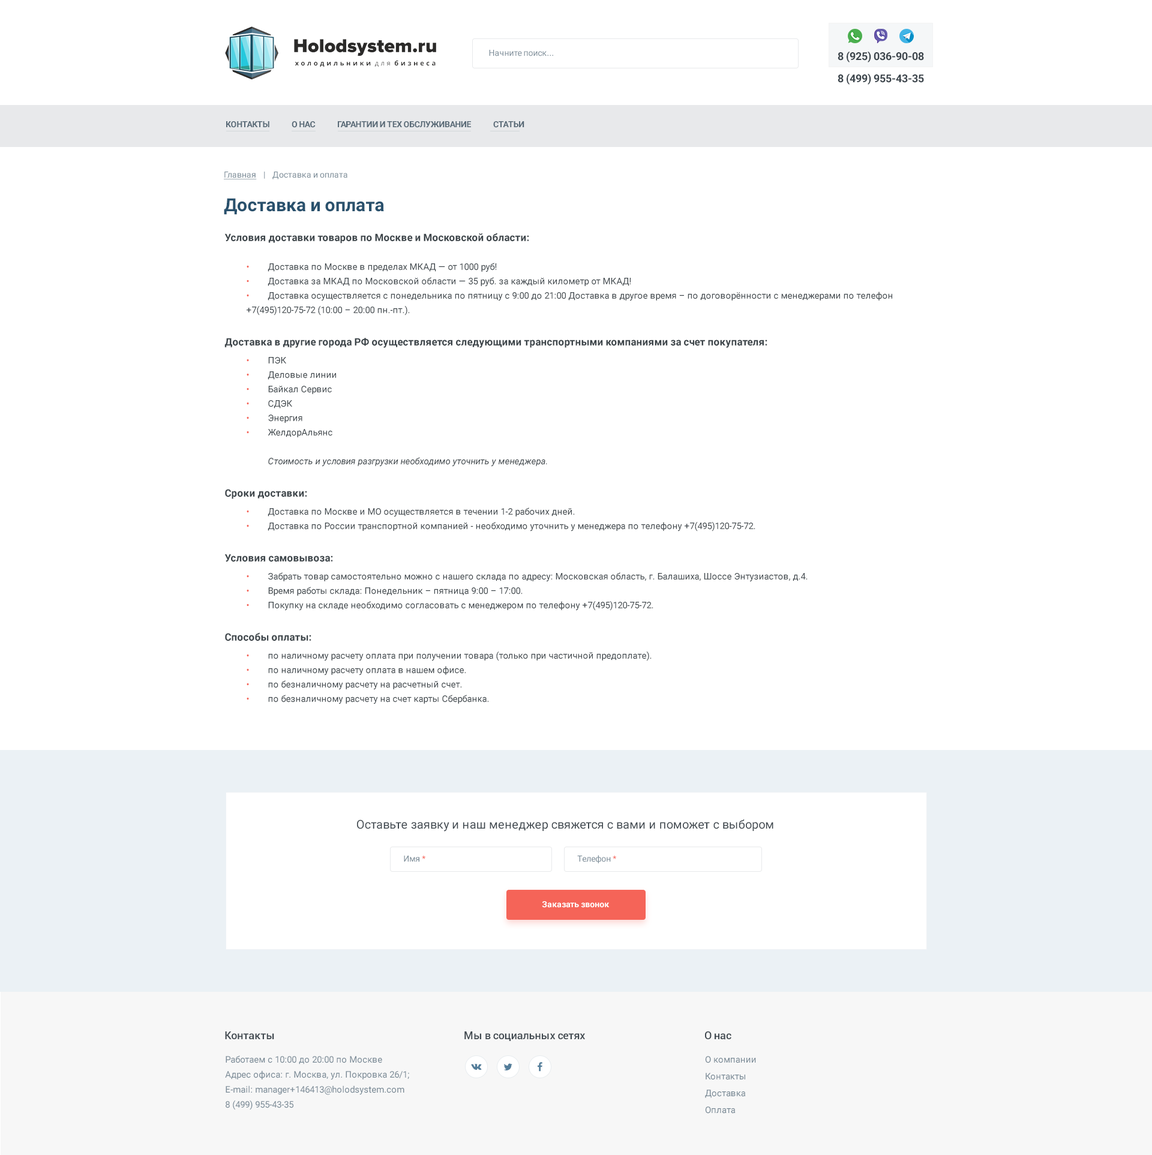
<style>
.page{position:relative;width:1152px;height:1155px;background:#ffffff}
.page>*{position:absolute;margin:0}
.t1{font:8.4px "Roboto-Regular";color:#788995}
.t2{font:10.8px "Roboto-Bold";color:#3b444b}
.t3{font:8.4px "Roboto-Bold";letter-spacing:-0.026em;color:#586976;text-transform:uppercase}
.t4{font:8.4px "Roboto-Regular";color:#788995;text-decoration:underline}
.t5{font:18px "Roboto-Bold";letter-spacing:0.005em;color:#29516d}
.t6{font:9px/14.4px "Roboto-Regular";color:#3d454a}
.t7{font:10.2px/14.4px "Roboto-Bold";color:#3d454a}
.t8{font:9px/14.4px "Roboto-Regular";color:#f56458}
.t9{font:10.2px/18px "Roboto-Bold";color:#3d454a}
.t10{font:9px/18px "Roboto-Regular";color:#f56458}
.t11{font:9px/18px "Roboto-Regular";color:#3d454a}
.t12{font:9px/14.4px "Roboto-Italic";color:#3d454a}
.t13{font:12px "Roboto-Regular";letter-spacing:0.005em;color:#3f484f}
.t14{font:8.4px "Roboto-Regular";color:#f56458}
.t15{font:8.4px "Roboto-Bold";color:#ffffff}
.t16{font:10.8px "Roboto-Medium";color:#3f484f}
.t17{font:9px/15px "Roboto-Regular";color:#788995}
.t18{font:9px/16.8px "Roboto-Regular";color:#788995}
</style>
<div class="page">
<p class="t1" style="left:489px;top:50px;width:64px;height:6px">Начните поиск...</p>
<p class="t2" style="left:838px;top:51px;width:86px;height:11px">8 (925) 036-90-08</p>
<p class="t2" style="left:838px;top:73px;width:86px;height:12px">8 (499) 955-43-35</p>
<p class="t3" style="left:226px;top:121px;width:298px;height:7px">Контакты              О нас              Гарантии и тех обслуживание              Статьи</p>
<p class="t1" style="left:224px;top:172px;width:123px;height:7px"><span class="t4">Главная</span>    |    Доставка и оплата</p>
<p class="t5" style="left:224px;top:198px;width:160px;height:17px">Доставка и оплата</p>
<p class="t6" style="left:224px;top:233px;width:668px;height:471px"><span class="t7">Условия доставки товаров по Москве и Московской области:<br><br> </span><span class="t8">•</span> Доставка по Москве в пределах МКАД — от 1000 руб!<br> <span class="t8">•</span> Доставка за МКАД по Московской области — 35 руб. за каждый километр от МКАД!<br> <span class="t8">•</span> Доставка осуществляется с понедельника по пятницу с 9:00 до 21:00 Доставка в другое время – по договорённости с менеджерами по телефон    +7(495)120-75-72 (10:00 – 20:00 пн.-пт.). <br><br><span class="t7">Доставка в другие города РФ</span><span class="t9"> осуществляется следующими транспортными компаниями за счет покупателя: <br> </span><span class="t10">•</span><span class="t11"> ПЭК<br> </span><span class="t8">•</span> Деловые линии<br> <span class="t8">•</span> Байкал Сервис<br> <span class="t8">•</span> СДЭК<br> <span class="t8">•</span> Энергия<br> <span class="t8">•</span> ЖелдорАльянс<br><br>  <span class="t12">Стоимость и условия разгрузки необходимо уточнить у менеджера.<br><br></span><span class="t7">Сроки д</span><span class="t9">оставки:<br> </span><span class="t10">•</span><span class="t11"> Доставк</span>а по Москве и МО осуществляется в течении 1-2 рабочих дней.<br> <span class="t8">•</span> Доставка по России транспортной компанией - необходимо уточнить у менеджера по телефону +7(495)120-75-72.<br> <br><span class="t7">Условия самов</span><span class="t9">ывоза:<br> </span><span class="t10">•</span><span class="t11"> Забрать товар с</span>амостоятельно можно с нашего склада по адресу: Московская область, г. Балашиха, Шоссе Энтузиастов, д.4.<br> <span class="t8">•</span> Время работы склада: Понедельник – пятница 9:00 – 17:00.<br> <span class="t8">•</span> Покупку на складе необходимо согласовать с менеджером по телефону +7(495)120-75-72.<br> <br><span class="t7">Способы </span><span class="t9">оплаты:<br> </span><span class="t10">•</span><span class="t11"> по налично</span>му расчету оплата при получении товара (только при частичной предоплате).<br> <span class="t8">•</span> по наличному расчету оплата в нашем офисе.<br> <span class="t8">•</span> по безналичному расчету на расчетный счет.<br> <span class="t8">•</span> по безналичному расчету на счет карты Сбербанка.</p>
<p class="t13" style="left:357px;top:819px;width:416px;height:13px">Оставьте заявку и наш менеджер свяжется с вами и поможет с выбором</p>
<p class="t1" style="left:404px;top:856px;width:21px;height:6px">Имя <span class="t14">*</span></p>
<p class="t1" style="left:577px;top:855px;width:39px;height:8px">Телефон <span class="t14">*</span></p>
<p class="t15" style="left:542px;top:901px;width:68px;height:7px">Заказать звонок</p>
<p class="t16" style="left:225px;top:1031px;width:49px;height:9px">Контакты</p>
<p class="t16" style="left:464px;top:1031px;width:121px;height:10px">Мы в социальных сетях</p>
<p class="t16" style="left:705px;top:1031px;width:26px;height:9px">О нас</p>
<p class="t17" style="left:225px;top:1055px;width:184px;height:55px">Работаем с 10:00 до 20:00 по Москве <br>Адрес офиса: г. Москва, ул. Покровка 26/1; <br>E-mail: manager+146413@holodsystem.com <br>8 (499) 955-43-35</p>
<p class="t18" style="left:705px;top:1056px;width:51px;height:58px">О компании <br>Контакты <br>Доставка <br>Оплата</p>
</div>
